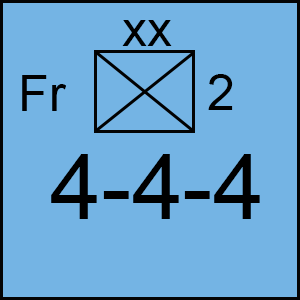
<style>
.page{position:relative;width:300px;height:300px;background:#74b4e4}
.page>*{position:absolute;margin:0}
.t1{font:50px "ArialMT";color:#000000}
.t2{font:91.7px "ArialMT";color:#000000}
</style>
<div class="page">
<p class="t1" style="left:122px;top:20px;width:50px;height:26px">xx</p>
<p class="t1" style="left:22px;top:75px;width:44px;height:36px">Fr</p>
<p class="t1" style="left:208px;top:74px;width:25px;height:36px">2</p>
<p class="t2" style="left:51px;top:154px;width:209px;height:65px">4-4-4</p>
</div>
